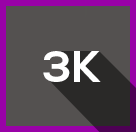
<style>
.page{position:relative;width:136px;height:132px;background:#545150}
.page>*{position:absolute;margin:0}
.t1{font:44px "NexaBold";color:#ffffff}
</style>
<div class="page">
<p class="t1" style="left:43px;top:51px;width:58px;height:31px">3K</p>
</div>
